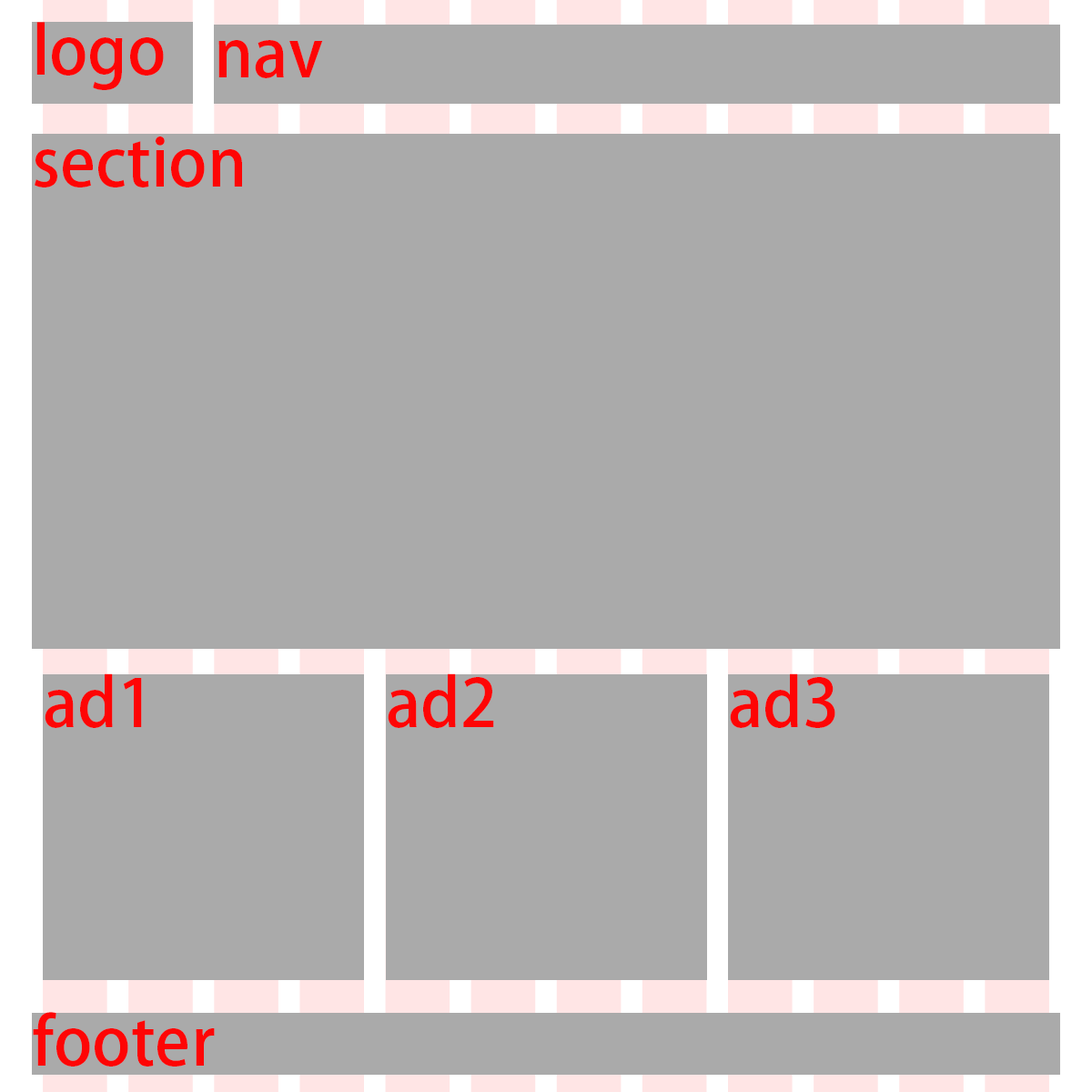
<style>
.page{position:relative;width:1092px;height:1092px;background:#aaaaaa}
.page>*{position:absolute;margin:0}
.t1{font:65.5px "AdobeFanHeitiStd-Bold";color:#fe0505}
</style>
<div class="page">
<p class="t1" style="left:36px;top:22px;width:128px;height:68px">logo</p>
<p class="t1" style="left:218px;top:40px;width:105px;height:38px">nav</p>
<p class="t1" style="left:35px;top:136px;width:207px;height:51px">section</p>
<p class="t1" style="left:45px;top:673px;width:97px;height:55px">ad1</p>
<p class="t1" style="left:388px;top:673px;width:106px;height:55px">ad2</p>
<p class="t1" style="left:730px;top:673px;width:105px;height:55px">ad3</p>
<p class="t1" style="left:33px;top:1012px;width:182px;height:55px">footer</p>
</div>
